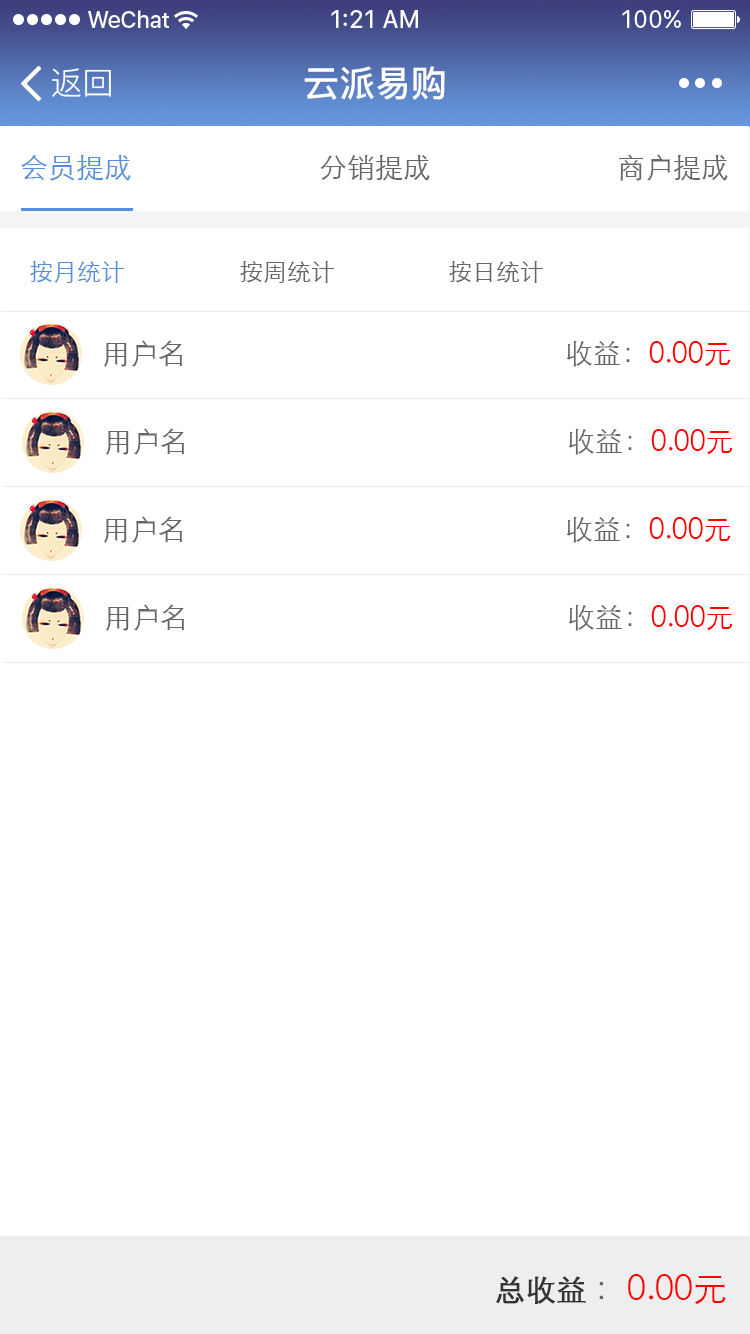
<style>
.page{position:relative;width:750px;height:1334px;background:#ffffff}
.page>*{position:absolute;margin:0}
.t1{font:32px "PingFang-SC-Regular";color:#ffffff}
.t2{font:36px "PingFang-SC-Bold";color:#ffffff}
.t3{font:28px "STXihei";color:#568fdc}
.t4{font:28px "STXihei";color:#666666}
.t5{font:24px "STXihei";color:#568fdc}
.t6{font:24px "STXihei";color:#666666}
.t7{font:28px "STXihei";color:#ff0000}
.t8{font:30px "STXihei";color:#333333;font-weight:bold}
.t9{font:34px "STXihei";color:#ff0000}
.t10{font:34px "STXihei";color:#666666}
</style>
<div class="page">
<p class="t1" style="left:52px;top:68px;width:59px;height:29px">返回</p>
<p class="t2" style="left:304px;top:66px;width:141px;height:34px">云派易购</p>
<p class="t3" style="left:21px;top:154px;width:110px;height:27px">会员提成</p>
<p class="t4" style="left:320px;top:155px;width:110px;height:26px">分销提成</p>
<p class="t4" style="left:619px;top:154px;width:109px;height:27px">商户提成</p>
<p class="t5" style="left:30px;top:261px;width:94px;height:22px">按月统计</p>
<p class="t6" style="left:240px;top:261px;width:94px;height:22px">按周统计</p>
<p class="t6" style="left:449px;top:261px;width:94px;height:22px">按日统计</p>
<p class="t4" style="left:103px;top:340px;width:79px;height:27px">用户名</p>
<p class="t7" style="left:566px;top:341px;width:165px;height:26px"><span class="t4">收益：</span>0.00元</p>
<p class="t4" style="left:105px;top:428px;width:79px;height:27px">用户名</p>
<p class="t7" style="left:568px;top:429px;width:165px;height:26px"><span class="t4">收益：</span>0.00元</p>
<p class="t4" style="left:103px;top:516px;width:79px;height:27px">用户名</p>
<p class="t7" style="left:566px;top:517px;width:165px;height:26px"><span class="t4">收益：</span>0.00元</p>
<p class="t4" style="left:105px;top:604px;width:79px;height:27px">用户名</p>
<p class="t7" style="left:568px;top:605px;width:165px;height:26px"><span class="t4">收益：</span>0.00元</p>
<p class="t8" style="left:496px;top:1276px;width:90px;height:28px">总收益</p>
<p class="t9" style="left:599px;top:1274px;width:127px;height:30px"><span class="t10">：</span>0.00元</p>
</div>
